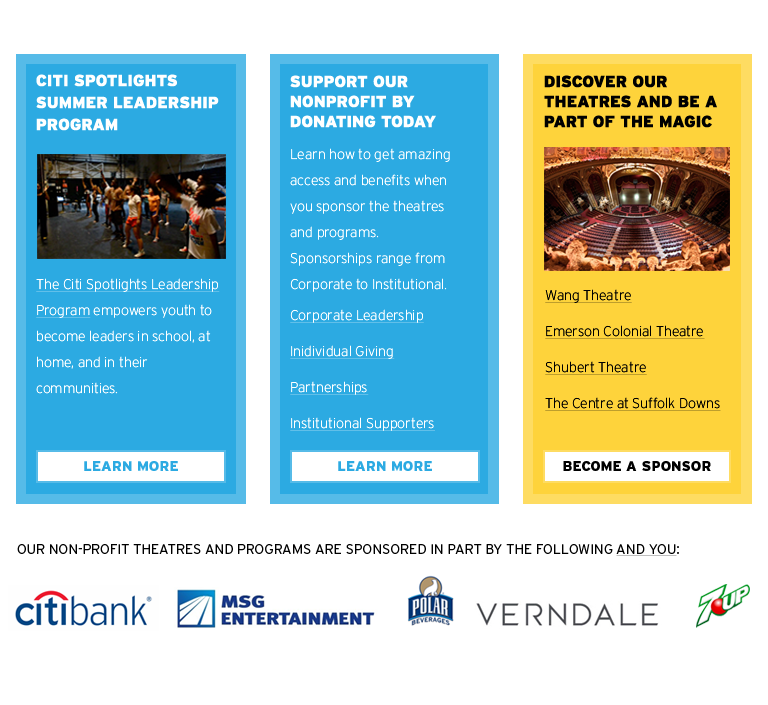
<style>
.page{position:relative;width:768px;height:705px;background:#ffffff}
.page>*{position:absolute;margin:0}
.t1{font:16px/22px "InterstatePlus-Black";color:#ffffff;text-transform:uppercase}
.t2{font:16px/20px "InterstatePlus-Black";color:#ffffff;text-transform:uppercase}
.t3{font:16px/20px "InterstatePlus-Black";color:#000000;text-transform:uppercase}
.t4{font:14px/26px "Interstate-ExtraLight";color:#ffffff}
.t5{font:14px/26px "Interstate-ExtraLight";color:#ffffff;text-decoration:underline}
.t6{font:14px/36px "Interstate-ExtraLight";color:#000000;text-decoration:underline}
.t7{font:14px/36px "Interstate-ExtraLight";color:#ffffff;text-decoration:underline}
.t8{font:14px "Interstate-Black";color:#2caae2}
.t9{font:14px "Interstate-Black";color:#000000;text-transform:uppercase}
.t10{font:14px "Interstate-Light";color:#000000}
.t11{font:14px "Interstate-Light";color:#000000;text-decoration:underline}
</style>
<div class="page">
<p class="t1" style="left:36px;top:74px;width:183px;height:57px">CITI SPOTLIGHTS<br>SUMMER LEADERSHIP<br>PROGRAM</p>
<p class="t2" style="left:290px;top:75px;width:146px;height:53px">SUPPORT OUR <br>NONPROFIT BY <br>DONATING TODAY</p>
<p class="t3" style="left:544px;top:75px;width:173px;height:53px">DISCOVER OUR <br>THEATRES AND BE A <br>PART OF THE MAGIC</p>
<p class="t4" style="left:290px;top:148px;width:160px;height:144px">Learn how to get amazing<br>access and benefits when<br>you sponsor the theatres<br>and programs. <br>Sponsorships range from <br>Corporate to Institutional.</p>
<p class="t4" style="left:36px;top:278px;width:184px;height:116px"><span class="t5">The Citi Spotlights Leadership Program</span> empowers youth to become leaders in school, at home, and in their communities.</p>
<p class="t6" style="left:545px;top:289px;width:176px;height:122px">Wang Theatre<br>Emerson Colonial Theatre<br>Shubert Theatre<br>The Centre at Suffolk Downs</p>
<p class="t7" style="left:290px;top:309px;width:145px;height:122px">Corporate Leadership<br>Inidividual Giving<br>Partnerships<br>Institutional Supporters</p>
<p class="t8" style="left:84px;top:461px;width:94px;height:10px">LEARN MORE</p>
<p class="t8" style="left:338px;top:461px;width:94px;height:10px">LEARN MORE</p>
<p class="t9" style="left:563px;top:461px;width:148px;height:10px">Become a sponsor</p>
<p class="t10" style="left:17px;top:544px;width:662px;height:12px">OUR NON-PROFIT THEATRES AND PROGRAMS ARE SPONSORED IN PART BY THE FOLLOWING <span class="t11">AND YOU</span>:</p>
</div>
